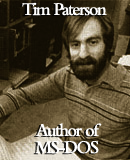
<style>
.page{position:relative;width:130px;height:160px}
.page>*{position:absolute;margin:0}
.t1{font:18.7px "BemboMT-SemiBold";letter-spacing:-0.08em;color:#ffffff;scale:0.95 1}
.t2{font:18.7px/17px "BemboMT-SemiBold";letter-spacing:-0.08em;color:#ffffff;scale:0.95 1}
</style>
<div class="page">
<p class="t1" style="left:22px;top:2px;width:85px;height:14px">Tim Paterson</p>
<p class="t2" style="left:35px;top:123px;width:67px;height:31px;text-align:center">Author of<br>MS-DOS</p>
</div>
